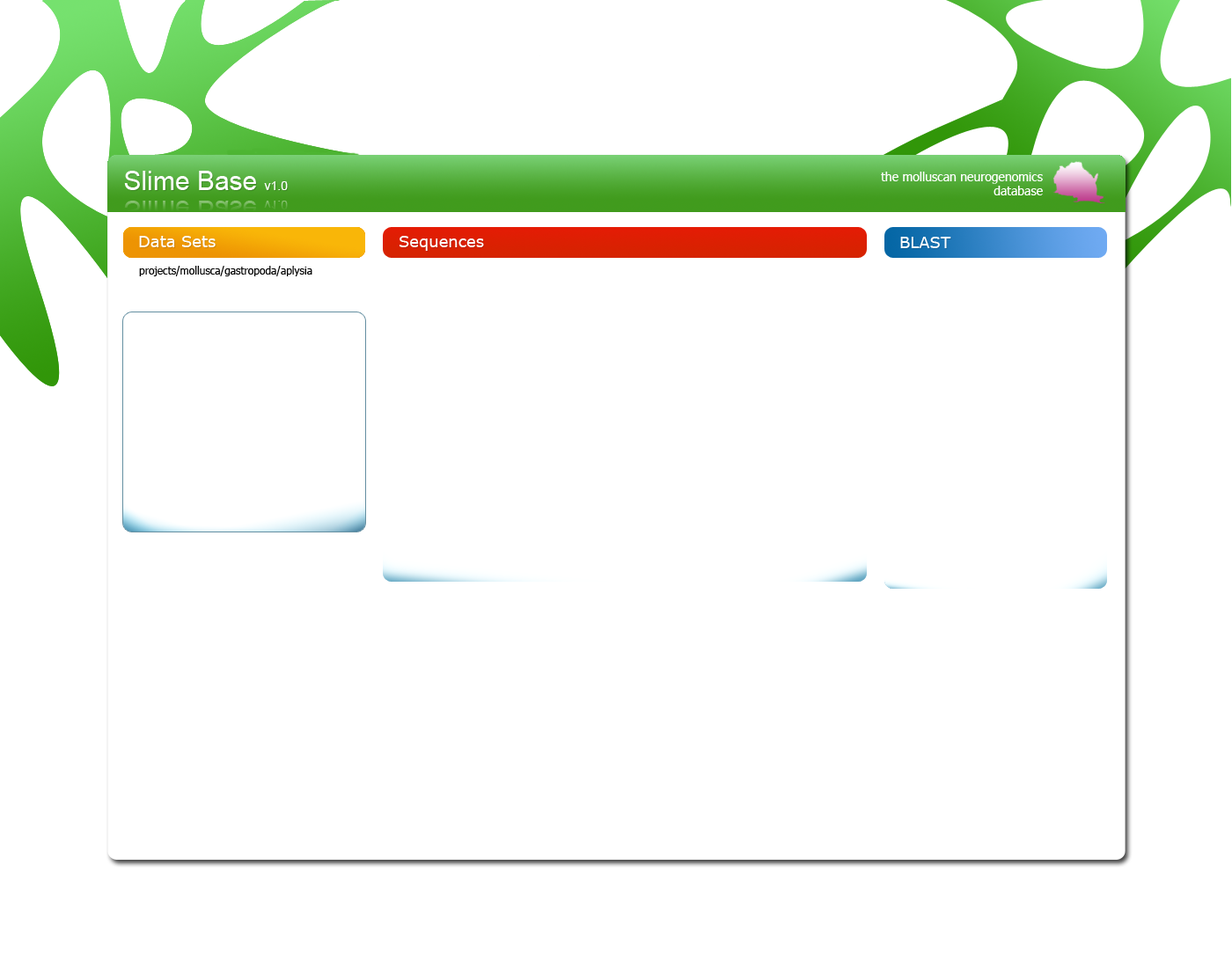
<style>
.page{position:relative;width:1232px;height:968px;background:#ffffff}
.page>*{position:absolute;margin:0}
.t1{font:12.3px "Tahoma";color:#ffffff}
.t2{font:15.8px "Verdana";color:#ffffff}
.t3{font:10.6px "Tahoma";color:#000000}
</style>
<div class="page">
<p class="t1" style="left:881px;top:172px;width:162px;height:23px;text-align:right">the molluscan neurogenomics<br>database</p>
<p class="t2" style="left:139px;top:236px;width:77px;height:11px">Data Sets</p>
<p class="t2" style="left:399px;top:236px;width:85px;height:15px">Sequences</p>
<p class="t2" style="left:900px;top:237px;width:51px;height:11px">BLAST</p>
<p class="t3" style="left:139px;top:266px;width:173px;height:10px">projects/mollusca/gastropoda/aplysia</p>
</div>
